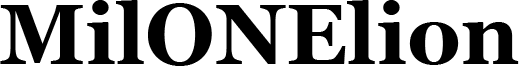
<style>
.page{position:relative;width:519px;height:66px;background:#ffffff}
.page>*{position:absolute;margin:0}
.t1{font:85px "Georgia-Bold";color:#000000}
</style>
<div class="page">
<p class="t1" style="left:0px;top:0px;width:519px;height:66px">MilONElion</p>
</div>
